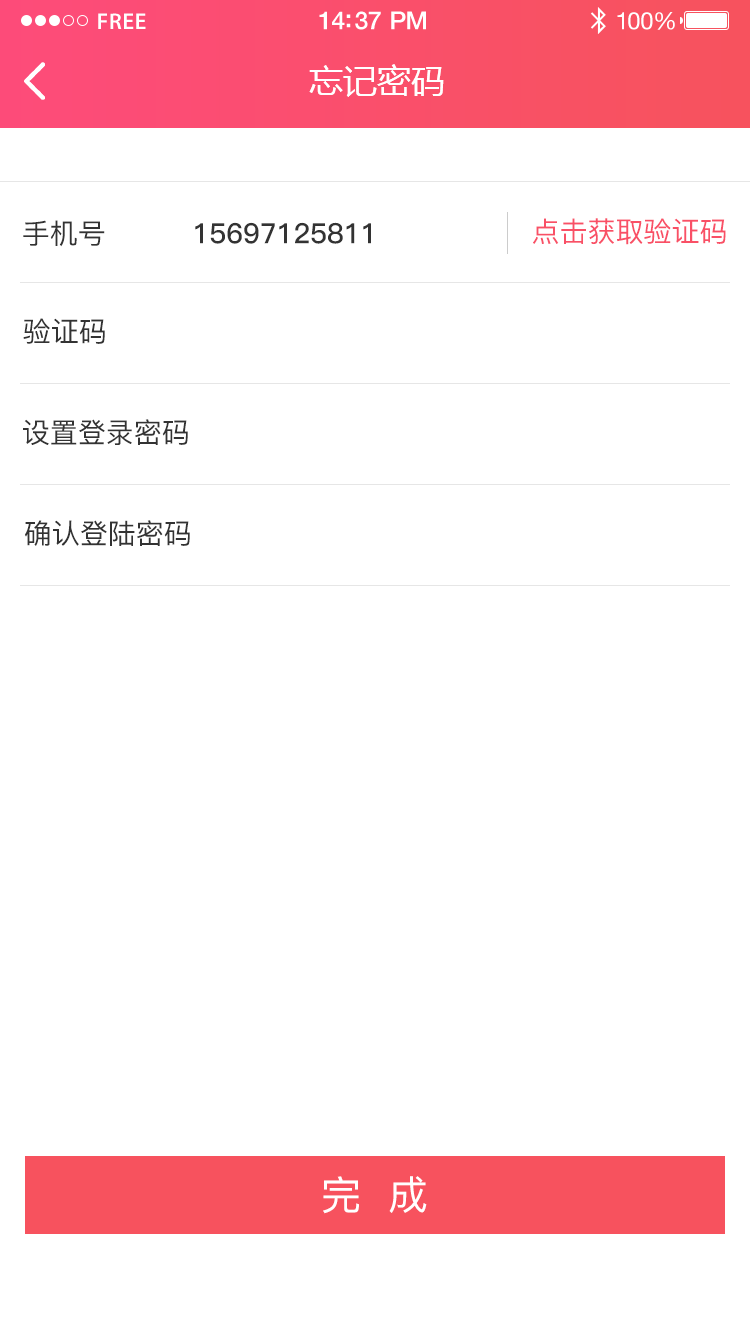
<style>
.page{position:relative;width:750px;height:1334px;background:#ffffff}
.page>*{position:absolute;margin:0}
.t1{font:23px "MyriadPro-Semibold";letter-spacing:0.02em;color:#ffffff}
.t2{font:25px "HelveticaNeue-Medium";letter-spacing:-0.02em;color:#ffffff}
.t3{font:24px "HelveticaNeue";letter-spacing:-0.02em;color:#ffffff}
.t4{font:34px "MicrosoftYaHei";color:#ffffff;text-transform:uppercase}
.t5{font:28px "PingFang-SC-Medium";color:#333333;text-transform:uppercase}
.t6{font:28px "PingFang-SC-Bold";color:#333333;text-transform:uppercase}
.t7{font:28px "PingFang-SC-Medium";color:#f95066;text-transform:uppercase}
.t8{font:40px "PingFang-SC-Medium";color:#ffffff;text-transform:uppercase}
</style>
<div class="page">
<p class="t1" style="left:98px;top:13px;width:48px;height:16px">FREE</p>
<p class="t2" style="left:319px;top:11px;width:107px;height:19px">14:37 PM</p>
<p class="t3" style="left:617px;top:12px;width:58px;height:18px">100%</p>
<p class="t4" style="left:309px;top:64px;width:135px;height:33px">忘记密码</p>
<p class="t5" style="left:23px;top:220px;width:82px;height:27px">手机号</p>
<p class="t6" style="left:195px;top:222px;width:176px;height:22px">15697125811</p>
<p class="t7" style="left:533px;top:218px;width:193px;height:27px">点击获取验证码</p>
<p class="t5" style="left:23px;top:318px;width:82px;height:26px">验证码</p>
<p class="t5" style="left:23px;top:419px;width:165px;height:26px">设置登录密码</p>
<p class="t5" style="left:25px;top:520px;width:165px;height:26px">确认登陆密码</p>
<p class="t8" style="left:323px;top:1176px;width:104px;height:38px">完  成</p>
</div>
